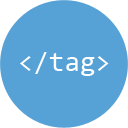
<style>
.page{position:relative;width:128px;height:128px;background:#56a1d5}
.page>*{position:absolute;margin:0}
.t1{font:28px "Consolas";color:#ffffff}
</style>
<div class="page">
<p class="t1" style="left:20px;top:52px;width:89px;height:24px">&lt;/tag&gt;</p>
</div>
